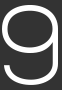
<style>
.page{position:relative;width:62px;height:90px;background:#333333}
.page>*{position:absolute;margin:0}
.t1{font:111.8px "NexaLight";color:#ffffff;scale:0.91 1}
</style>
<div class="page">
<p class="t1" style="left:2px;top:4px;width:56px;height:81px">9</p>
</div>
